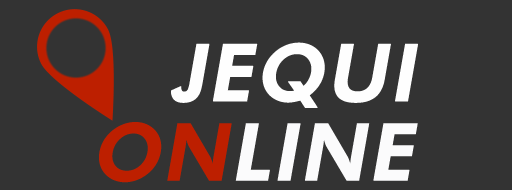
<style>
.page{position:relative;width:512px;height:190px;background:#333333}
.page>*{position:absolute;margin:0}
.t1{font:79.4px/79.4px "FuturaBT-Heavy";color:#fefefe;text-transform:uppercase;font-weight:bold;font-style:italic}
.t2{font:79.4px/79.4px "FuturaBT-Heavy";color:#000002;text-transform:uppercase;font-weight:bold;font-style:italic}
.t3{font:79.4px/79.4px "FuturaBT-Heavy";color:#bd1f00;text-transform:uppercase;font-weight:bold;font-style:italic}
.t4{font:79.4px/79.4px "FuturaBT-Heavy";color:#fbfbfc;text-transform:uppercase;font-weight:bold;font-style:italic}
</style>
<div class="page">
<p class="t1" style="left:99px;top:42px;width:319px;height:141px;text-align:center"><span class="t2">   </span>Jequi<br><span class="t3">On</span><span class="t4">line</span></p>
</div>
